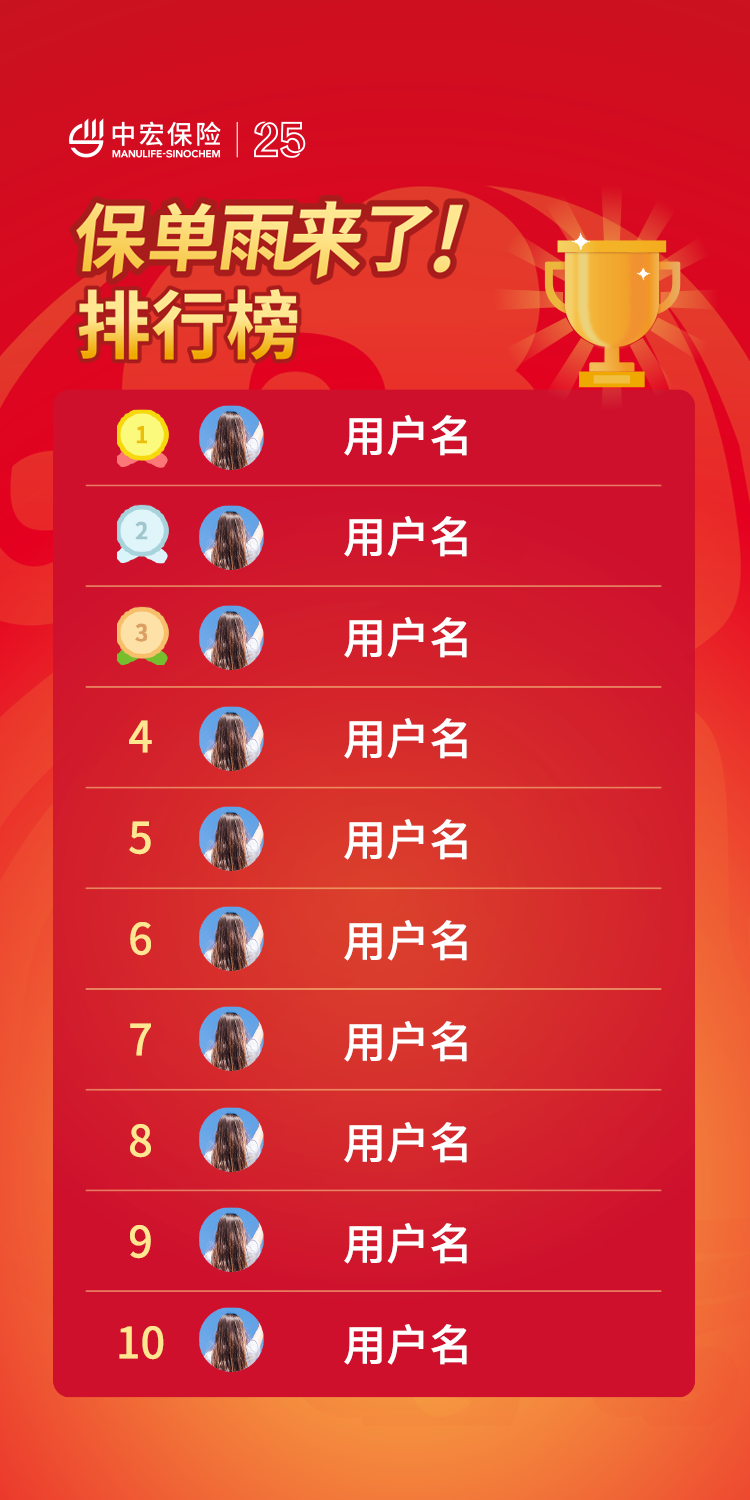
<style>
.page{position:relative;width:750px;height:1500px}
.page>*{position:absolute;margin:0}
.t1{font:43.3px/101px "NotoSansCJKsc-Medium";color:#ffffff}
.t2{font:43.3px/101px "NotoSansCJKsc-Medium";color:#ffe792}
</style>
<div class="page">
<p class="t1" style="left:344px;top:415px;width:123px;height:950px">用户名<br>用户名<br>用户名<br>用户名<br>用户名<br>用户名<br>用户名<br>用户名<br>用户名<br>用户名</p>
<p class="t2" style="left:119px;top:720px;width:45px;height:640px;text-align:center">4<br>5<br>6<br>7<br>8<br>9<br>10</p>
</div>
